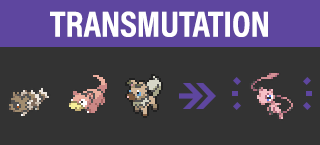
<style>
.page{position:relative;width:320px;height:145px;background:#333333}
.page>*{position:absolute;margin:0}
.t1{font:36.3px "AcuminProCond-Bold";color:#ffffff;text-transform:uppercase}
</style>
<div class="page">
<p class="t1" style="left:50px;top:11px;width:218px;height:26px">Transmutation</p>
</div>
